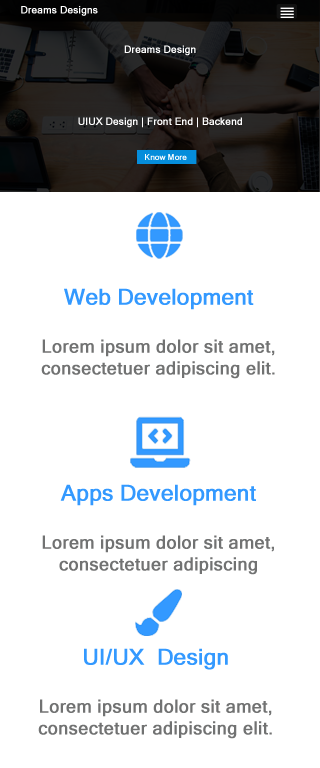
<style>
.page{position:relative;width:320px;height:768px;background:#ffffff}
.page>*{position:absolute;margin:0}
.t1{font:10px "MicrosoftSansSerif";color:#ffffff;font-weight:bold}
.t2{font:10px/36px "MicrosoftSansSerif";color:#ffffff;font-weight:bold}
.t3{font:8px "MicrosoftSansSerif";color:#ffffff;font-weight:bold}
.t4{font:18px "MicrosoftSansSerif";color:#717272;font-weight:bold}
.t5{font:22px "MicrosoftSansSerif";color:#3399ff;font-weight:bold}
</style>
<div class="page">
<p class="t1" style="left:21px;top:6px;width:77px;height:10px">Dreams Designs</p>
<p class="t2" style="left:78px;top:45px;width:164px;height:83px;text-align:center">Dreams Design<br><br>UIUX Design | Front End | Backend</p>
<p class="t3" style="left:145px;top:154px;width:42px;height:6px">Know More</p>
<p class="t4" style="left:41px;top:288px;width:234px;height:91px;text-align:center"><span class="t5">Web Development<br><br></span>Lorem ipsum dolor sit amet, consectetuer adipiscing elit. Maecenas porttitor congue massa.</p>
<p class="t4" style="left:42px;top:484px;width:232px;height:91px;text-align:center"><span class="t5">Apps Development<br><br></span>Lorem ipsum dolor sit amet, consectetuer adipiscing elit. Maecenas porttitor congue massa.</p>
<p class="t4" style="left:38px;top:648px;width:234px;height:91px;text-align:center"><span class="t5">UI/UX  Design<br><br></span>Lorem ipsum dolor sit amet, consectetuer adipiscing elit. Maecenas porttitor congue massa.</p>
</div>
